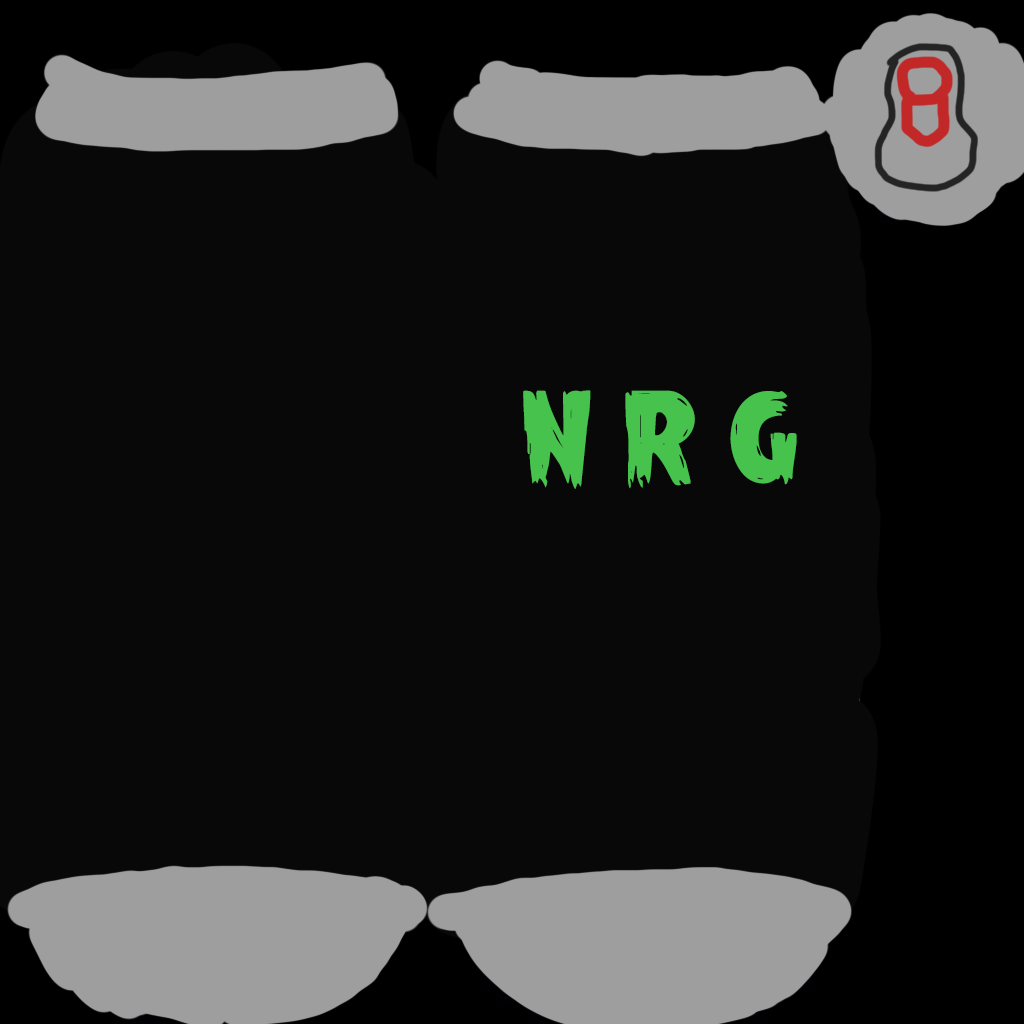
<style>
.page{position:relative;width:1024px;height:1024px;background:#080808}
.page>*{position:absolute;margin:0}
.t1{font:120px "Mrs.Monster";color:#47c24d}
</style>
<div class="page">
<p class="t1" style="left:523px;top:390px;width:274px;height:99px">N R G</p>
</div>
